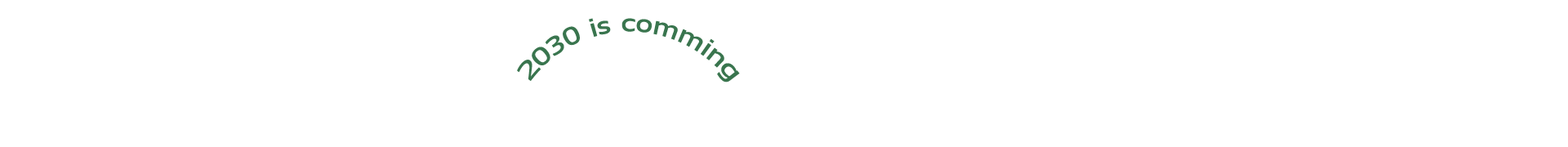
<style>
.page{position:relative;width:1568px;height:147px;background:#ffffff}
.page>*{position:absolute;margin:0}
.t1{font:24.5px/22.3px "Tahoma";color:#39764e}
</style>
<div class="page">
<p class="t1" style="left:517px;top:18px;width:223px;height:64px;text-align:center">2030 is comming</p>
</div>
